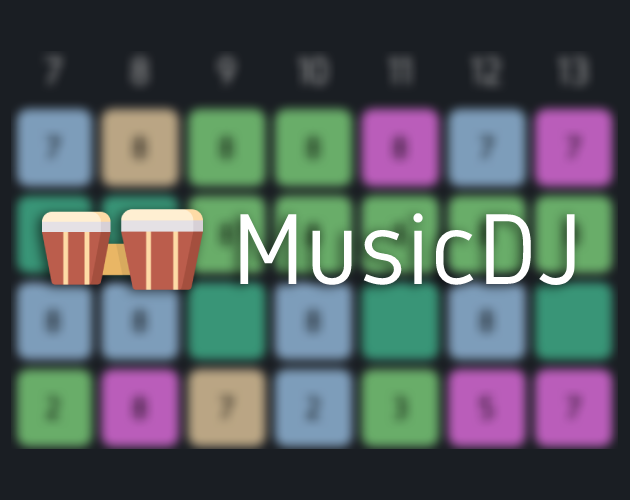
<style>
.page{position:relative;width:630px;height:500px;background:#1a1e23}
.page>*{position:absolute;margin:0}
.t1{font:100.8px "Gidole-Regular";color:#ffffff}
</style>
<div class="page">
<p class="t1" style="left:240px;top:213px;width:335px;height:72px">MusicDJ</p>
</div>
